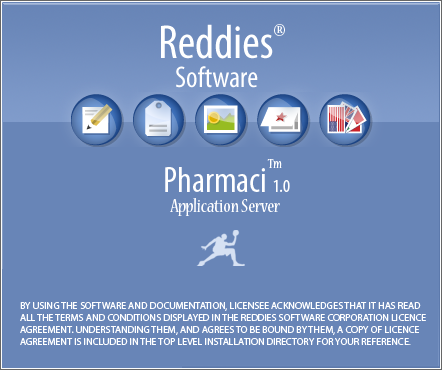
<style>
.page{position:relative;width:442px;height:370px;background:#6885b7}
.page>*{position:absolute;margin:0}
.t1{font:48px "MyriadPro-Cond";color:#ffffff}
.t2{font:60px "NuevaStd-Cond";color:#ffffff}
.t3{font:30px "MyriadPro-Cond";color:#ffffff}
.t4{font:14px "NuevaStd-Cond";color:#ffffff}
.t5{font:36px "MyriadPro-Cond";color:#ffffff}
.t6{font:18px "MyriadPro-Cond";color:#ffffff}
.t7{font:20px "NuevaStd-Cond";color:#ffffff}
.t8{font:10px "MyriadPro-Regular";color:#ffffff}
.t9{font:10px "Garamond";color:#ffffff}
</style>
<div class="page">
<p class="t1" style="left:161px;top:24px;width:112px;height:35px">Reddies</p>
<p class="t2" style="left:274px;top:24px;width:11px;height:12px">®</p>
<p class="t3" style="left:176px;top:66px;width:82px;height:22px">Software</p>
<p class="t4" style="left:267px;top:159px;width:15px;height:9px">Tm</p>
<p class="t5" style="left:165px;top:167px;width:125px;height:25px">Pharmaci <span class="t6">1.0</span></p>
<p class="t7" style="left:170px;top:198px;width:110px;height:18px">Application Server</p>
<p class="t8" style="left:20px;top:302px;width:406px;height:43px">BY USING THE SOFTWARE AND DOCUMENTATION, LICENSEE ACKNOWLEDGES THAT IT HAS READ<br>ALL THE TERMS AND CONDITIONS DISPLAYED IN THE REDDIES SOFTWARE CORPORATION LICENCE<br>AGREEMENT. UNDERSTANDING THEM, AND AGREES TO BE BOUND BY THEM, A COPY OF LICENCE<br>AGREEMENT IS INCLUDED IN THE TOP LEVEL INSTALLATION DIRECTORY FOR YOUR REFERENCE<span class="t9">.</span></p>
</div>
